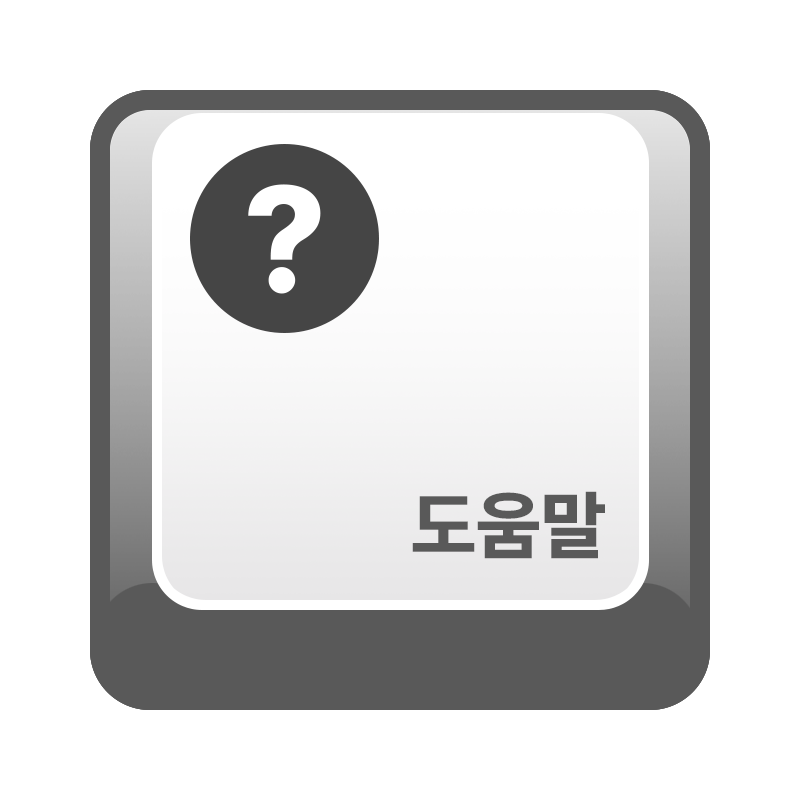
<style>
.page{position:relative;width:800px;height:800px;background:#ffffff}
.page>*{position:absolute;margin:0}
.t1{font:75px "Pretendard-ExtraBold";color:#595959}
</style>
<div class="page">
<p class="t1" style="left:412px;top:491px;width:193px;height:68px">도움말</p>
</div>
